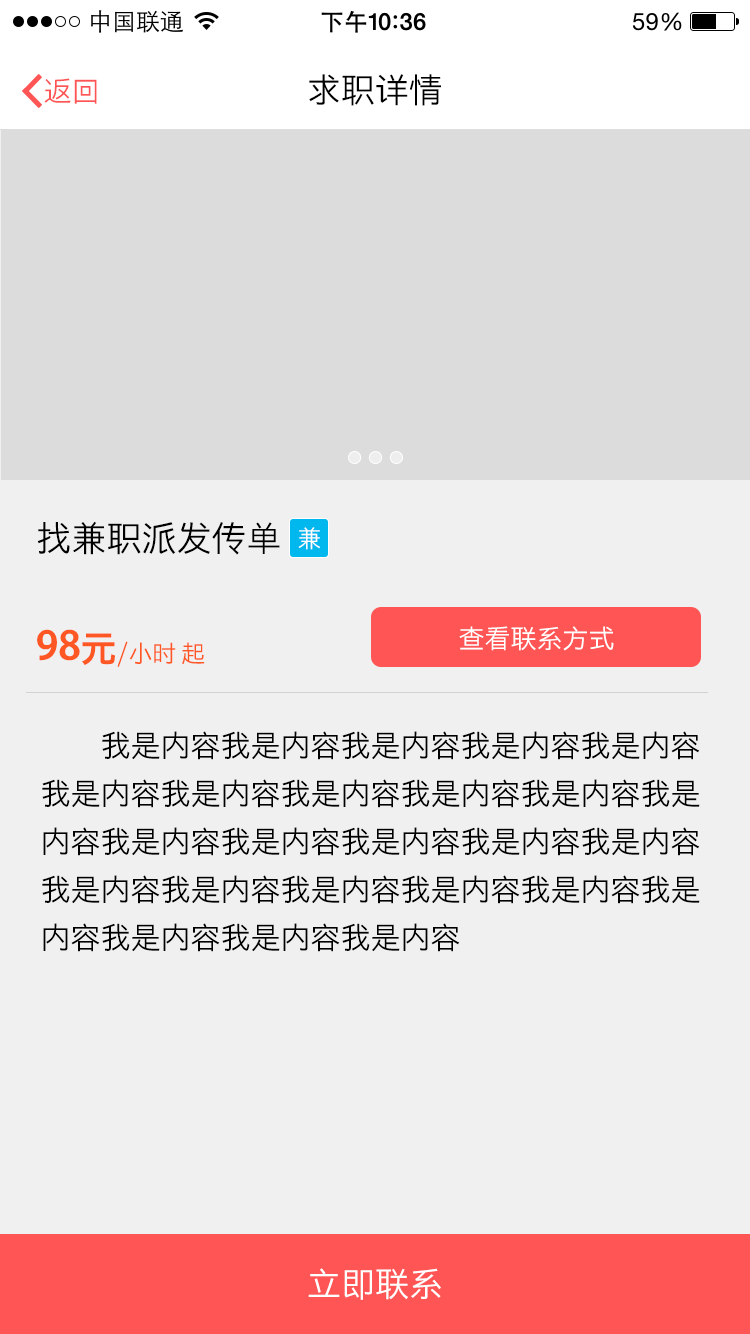
<style>
.page{position:relative;width:750px;height:1334px;background:#f0f0f0}
.page>*{position:absolute;margin:0}
.t1{font:28px "STHeitiSC-Light";color:#ff5555}
.t2{font:34px "STHeitiSC-Light";color:#000000}
.t3{font:35px "STHeitiSC-Light";color:#000000}
.t4{font:24px "STHeitiSC-Light";color:#ffffff}
.t5{font:24px "STHeitiSC-Light";color:#ff5723}
.t6{font:48px "STHeitiSC-Medium";color:#ff5723}
.t7{font:36px "STHeitiSC-Medium";color:#ff5723}
.t8{font:26px "STHeitiSC-Light";color:#ffffff}
.t9{font:30px/48px "STHeitiSC-Light";color:#000000}
.t10{font:34px "STHeitiSC-Light";color:#ffffff}
</style>
<div class="page">
<p class="t1" style="left:44px;top:78px;width:53px;height:26px">返回</p>
<p class="t2" style="left:309px;top:74px;width:132px;height:32px">求职详情</p>
<p class="t3" style="left:37px;top:521px;width:243px;height:34px">找兼职派发传单</p>
<p class="t4" style="left:298px;top:527px;width:22px;height:23px">兼</p>
<p class="t5" style="left:37px;top:629px;width:168px;height:38px"><span class="t6">98</span><span class="t7">元</span>/小时 起</p>
<p class="t8" style="left:459px;top:626px;width:155px;height:25px">查看联系方式</p>
<p class="t9" style="left:42px;top:731px;width:658px;height:221px">我是内容我是内容我是内容我是内容我是内容<br>我是内容我是内容我是内容我是内容我是内容我是<br>内容我是内容我是内容我是内容我是内容我是内容<br>我是内容我是内容我是内容我是内容我是内容我是<br>内容我是内容我是内容我是内容</p>
<p class="t10" style="left:308px;top:1268px;width:133px;height:32px">立即联系</p>
</div>
